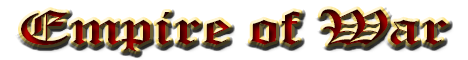
<style>
.page{position:relative;width:468px;height:60px;background:#ffffff}
.page>*{position:absolute;margin:0}
.t1{font:48.1px "OldEnglishTextMT";scale:1.49 1}
</style>
<div class="page">
<p class="t1" style="left:21px;top:9px;width:427px;height:43px">Empire of War</p>
</div>
